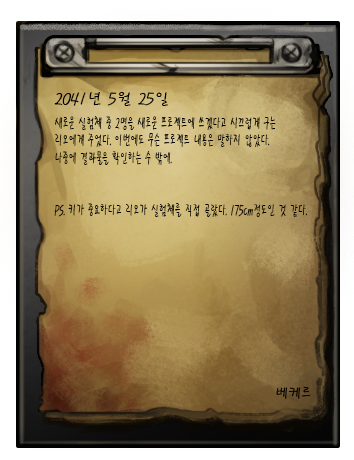
<style>
.page{position:relative;width:354px;height:460px}
.page>*{position:absolute;margin:0}
.t1{font:16.7px "PyunjiR-HM";color:#000000}
.t2{font:14.6px "PyunjiR-HM";color:#000000;scale:0.61 1}
.t3{font:14.6px "PyunjiR-HM";color:#000000}
</style>
<div class="page">
<p class="t1" style="left:54px;top:92px;width:114px;height:14px">2041년 5월 25일</p>
<p class="t2" style="left:54px;top:115px;width:253px;height:102px">새로운 실험체 중 2명을 새로운 프로젝트에 쓰겠다고 시끄럽게 구는 리오에게 주었다. 이번에도 무슨 프로젝트 내용은 말하지 않았다.<br>나중에 결과물을 확인하는 수 밖에.<br><br><br>PS. 키가 중요하다고 리오가 실험체를 직접 골랐다. 175cm정도인 것 같다.</p>
<p class="t3" style="left:276px;top:386px;width:35px;height:13px">베케르</p>
</div>
